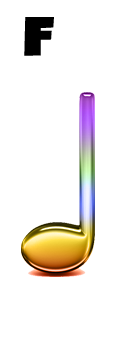
<style>
.page{position:relative;width:115px;height:350px;background:#ffffff}
.page>*{position:absolute;margin:0}
.t1{font:54px "LuckiestGuy-Regular";letter-spacing:0.005em;color:#000000;font-weight:bold;scale:1.11 1}
</style>
<div class="page">
<p class="t1" style="left:24px;top:17px;width:30px;height:39px">F</p>
</div>
